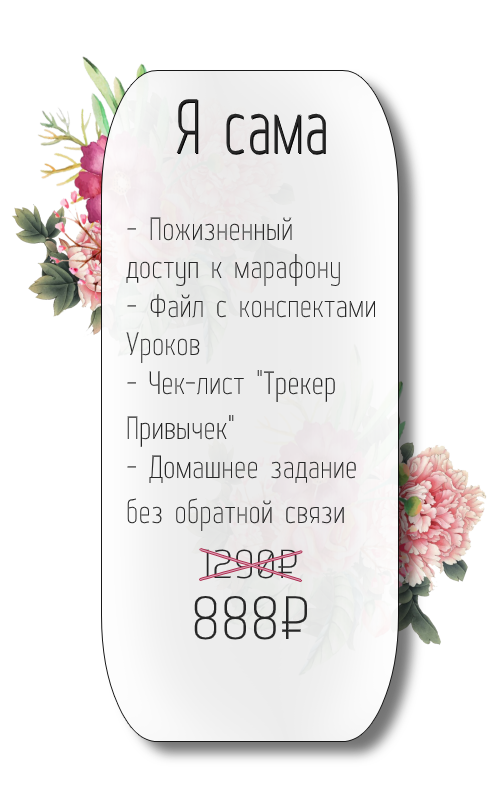
<style>
.page{position:relative;width:500px;height:800px;background:#ffffff}
.page>*{position:absolute;margin:0}
.t1{font:76.7px "WebServeroff";color:#272727;scale:0.83 1}
.t2{font:32px "WebServeroff";color:#272727}
.t3{font:40.4px "WebServeroff";color:#272727;scale:1.28 1}
.t4{font:61.2px "WebServeroff";color:#272727;scale:1.15 1}
</style>
<div class="page">
<p class="t1" style="left:176px;top:99px;width:149px;height:55px">Я сама</p>
<p class="t2" style="left:126px;top:217px;width:249px;height:314px">- Пожизненный<br>доступ к марафону<br>- Файл с конспектами<br>Уроков<br>- Чек-лист "Трекер<br>Привычек"<br>- Домашнее задание<br>без обратной связи</p>
<p class="t3" style="left:203px;top:549px;width:94px;height:30px">1290₽</p>
<p class="t4" style="left:194px;top:596px;width:113px;height:44px">888₽</p>
</div>
